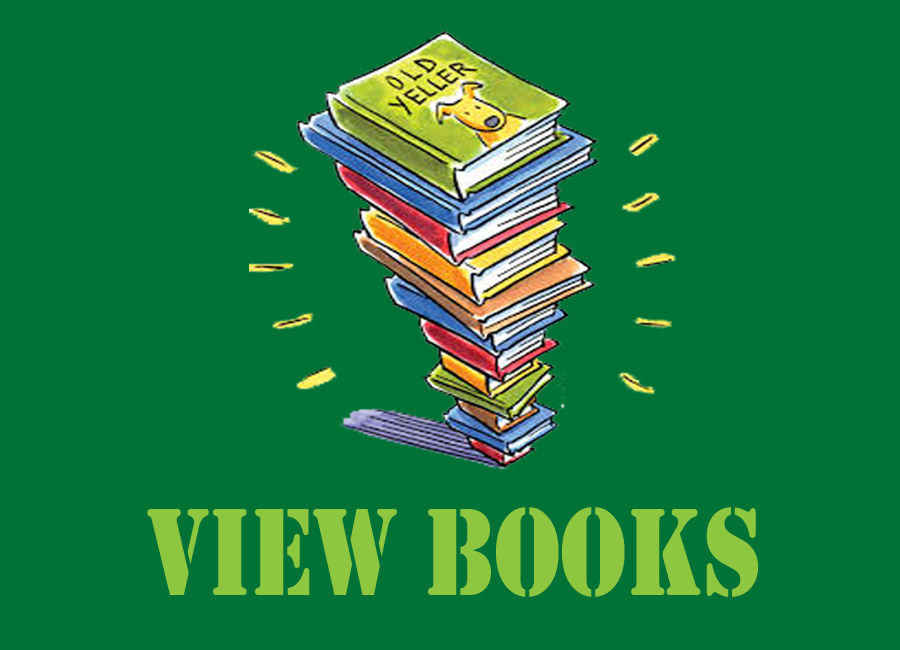
<style>
.page{position:relative;width:900px;height:650px;background:#007236}
.page>*{position:absolute;margin:0}
.t1{font:129.3px "Stencil";color:#8dc63f;scale:0.81 1}
</style>
<div class="page">
<p class="t1" style="left:147px;top:507px;width:611px;height:90px">View Books</p>
</div>
